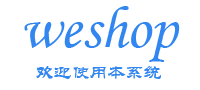
<style>
.page{position:relative;width:200px;height:90px;background:#ffffff}
.page>*{position:absolute;margin:0}
.t1{font:60px "STLiti";color:#3286ef}
.t2{font:18px "STLiti";color:#3286ef}
</style>
<div class="page">
<p class="t1" style="left:24px;top:6px;width:156px;height:56px">weshop</p>
<p class="t2" style="left:36px;top:66px;width:125px;height:13px">欢迎使用本系统</p>
</div>
